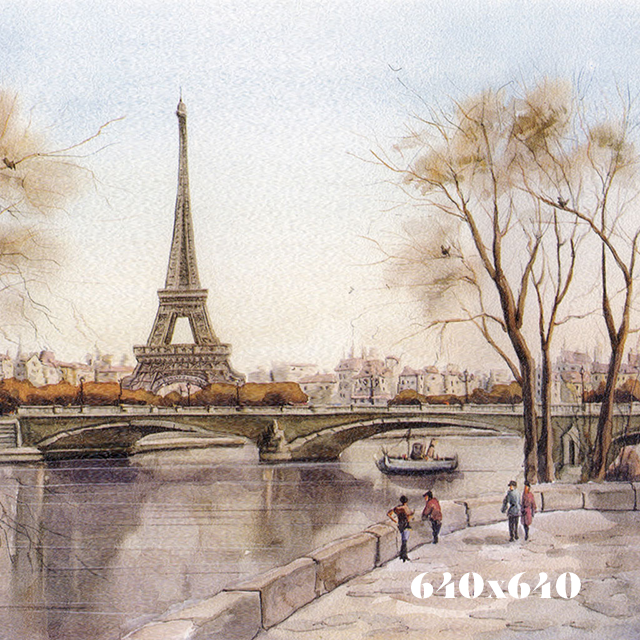
<style>
.page{position:relative;width:640px;height:640px}
.page>*{position:absolute;margin:0}
.t1{font:36px "Salome-Fine";color:#ffffff}
</style>
<div class="page">
<p class="t1" style="left:411px;top:571px;width:170px;height:28px">640x640</p>
</div>
